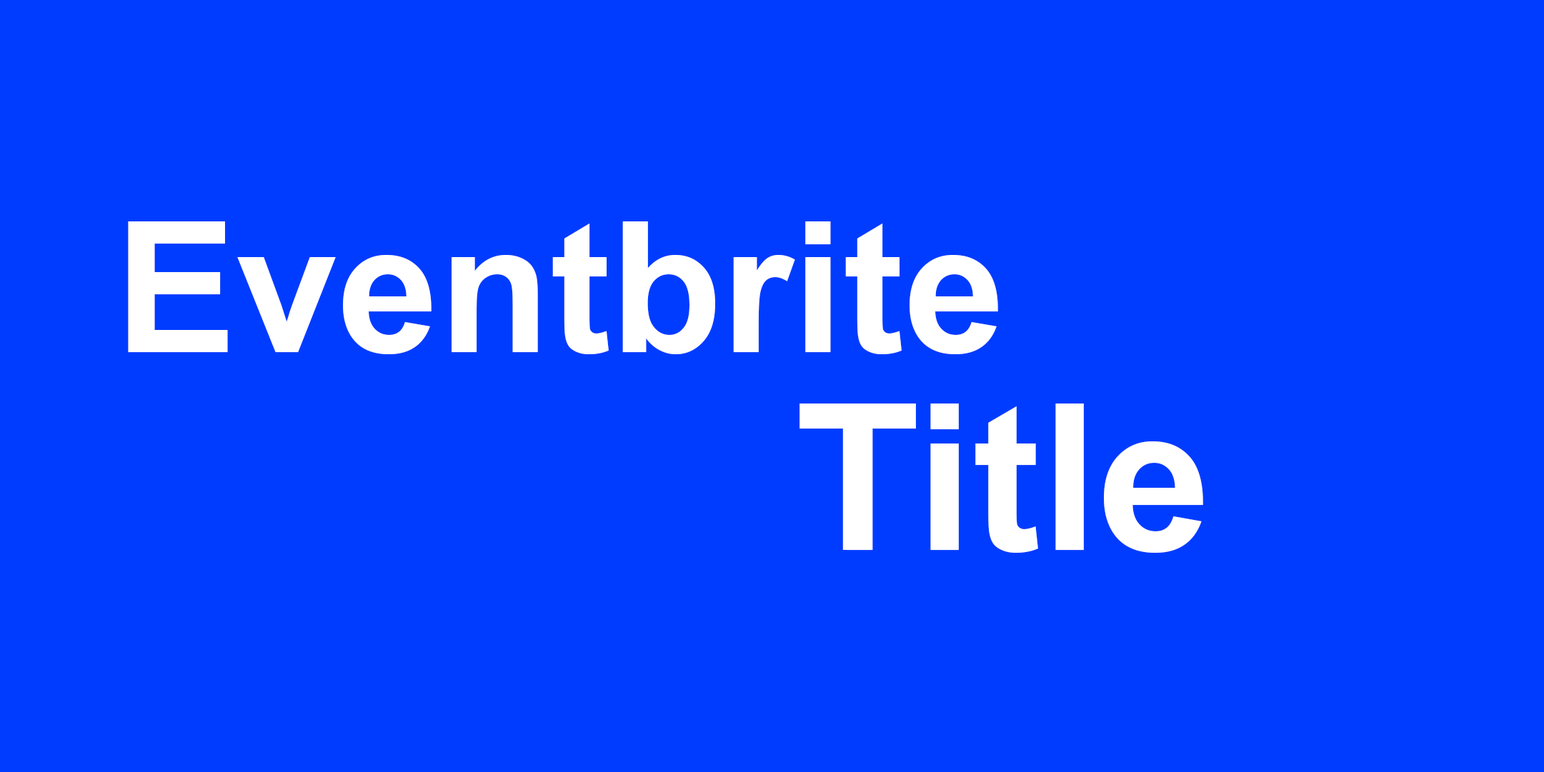
<style>
.page{position:relative;width:1544px;height:772px;background:#003cff}
.page>*{position:absolute;margin:0}
.t1{font:182px "Arial-BoldMT";color:#ffffff}
.t2{font:204.1px "Arial-BoldMT";color:#ffffff}
</style>
<div class="page">
<p class="t1" style="left:128px;top:221px;width:870px;height:133px">Eventbrite</p>
<p class="t2" style="left:799px;top:404px;width:404px;height:149px">Title</p>
</div>
